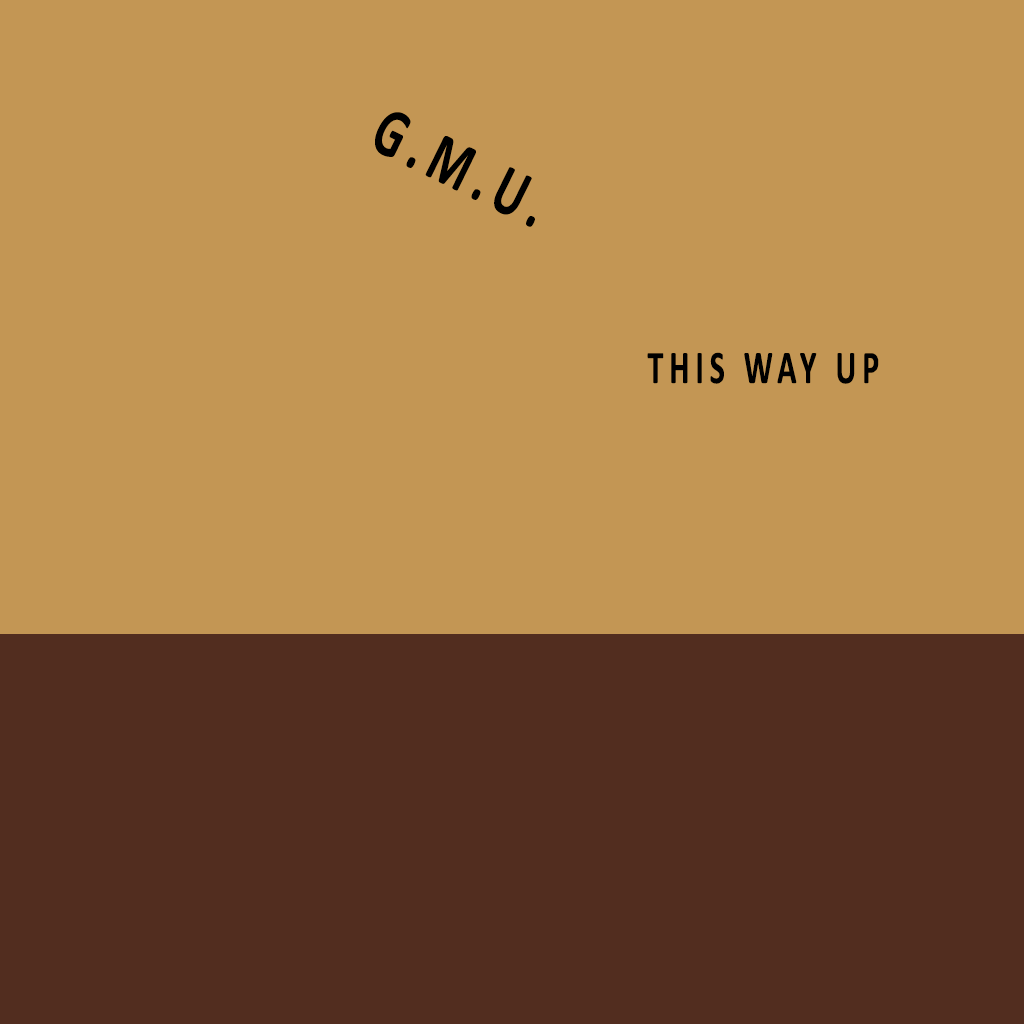
<style>
.page{position:relative;width:1024px;height:1024px;background:#c39654}
.page>*{position:absolute;margin:0}
.t1{font:70.6px "Calibri-Bold";letter-spacing:0.18em;color:#000000;scale:0.68 1}
.t2{font:47px "Calibri-Bold";letter-spacing:0.18em;color:#000000;scale:0.68 1}
</style>
<div class="page">
<p class="t1" style="left:375px;top:112px;width:160px;height:115px;rotate:26deg">G.M.U.</p>
<p class="t2" style="left:647px;top:352px;width:232px;height:32px">THIS WAY UP</p>
</div>
